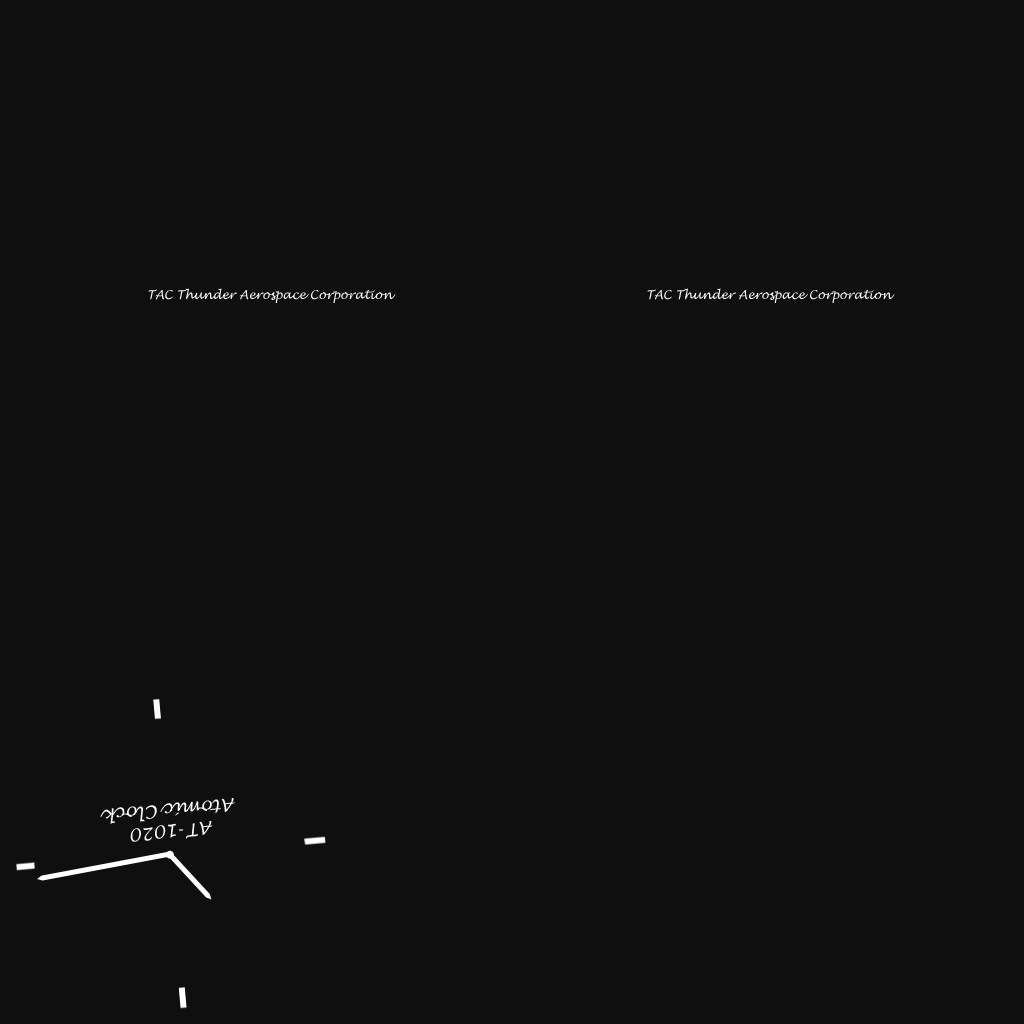
<style>
.page{position:relative;width:1024px;height:1024px;background:#0f0f0f}
.page>*{position:absolute;margin:0}
.t1{font:12px "LucidaHandwriting-Italic";color:#ffffff}
.t2{font:17.9px "LucidaHandwriting-Italic";color:#ffffff}
</style>
<div class="page">
<p class="t1" style="left:148px;top:288px;width:248px;height:15px">TAC Thunder Aerospace Corporation</p>
<p class="t1" style="left:647px;top:288px;width:248px;height:15px">TAC Thunder Aerospace Corporation</p>
<p class="t2" style="left:100px;top:798px;width:135px;height:44px;text-align:center;rotate:175deg">AT-1020<br>Atomic Clock</p>
</div>
